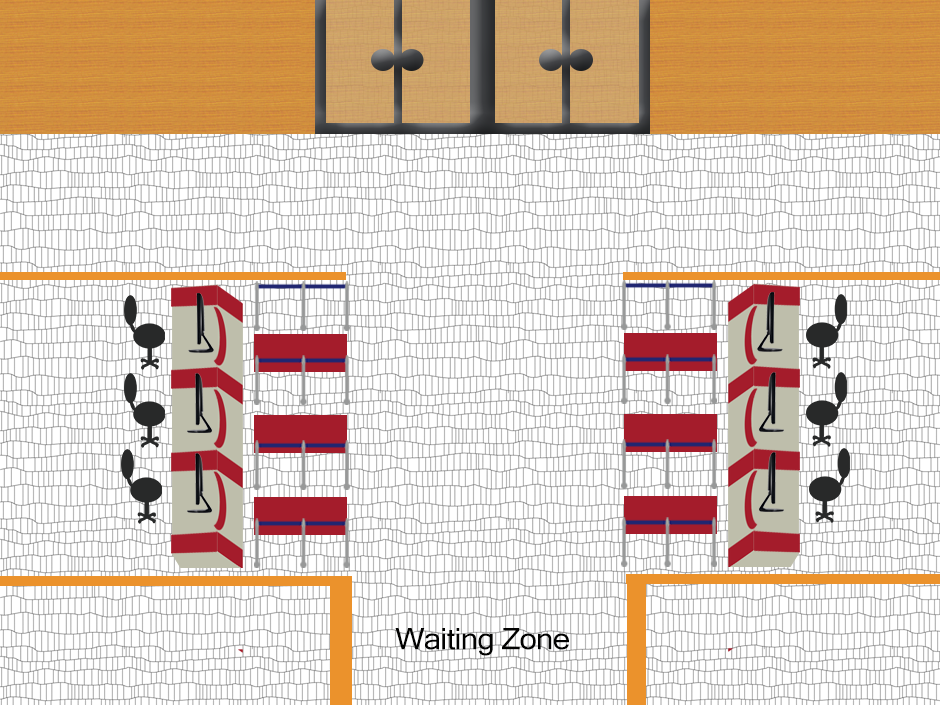
<style>
.page{position:relative;width:940px;height:705px;background:#ffffff}
.page>*{position:absolute;margin:0}
.t1{font:29.8px "MicrosoftSansSerif";letter-spacing:-0.025em;color:#020201;scale:1.04 1}
</style>
<div class="page">
<p class="t1" style="left:395px;top:628px;width:174px;height:28px">Waiting Zone</p>
</div>
